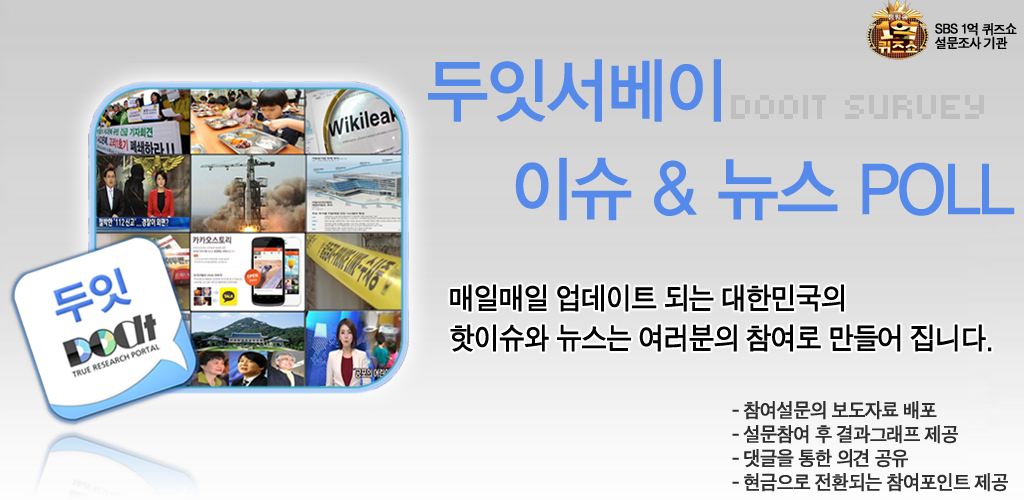
<style>
.page{position:relative;width:1024px;height:500px}
.page>*{position:absolute;margin:0}
.t1{font:13.8px/6.9px "SandTg";letter-spacing:-0.05em;color:#000000;font-weight:bold;scale:0.95 1}
.t2{font:70px "YDIYGO330";letter-spacing:-0.05em;color:#558aea;font-weight:bold;scale:0.95 1}
.t3{font:38px "Kroeger0555";color:#bfbfbf;text-transform:uppercase}
.t4{font:30px/10px "SandTg";letter-spacing:-0.05em;color:#000001;font-weight:bold;scale:0.95 1}
.t5{font:20px/12px "SandTg";letter-spacing:-0.05em;color:#2e2e30;font-weight:bold;scale:0.95 1}
</style>
<div class="page">
<p class="t1" style="left:935px;top:23px;width:82px;height:27px">SBS 1억 퀴즈쇼<br><br>설문조사 기관</p>
<p class="t2" style="left:428px;top:59px;width:293px;height:63px">두잇서베이</p>
<p class="t3" style="left:731px;top:95px;width:253px;height:24px">DOOIT SURVEY</p>
<p class="t2" style="left:515px;top:157px;width:500px;height:64px">이슈 &amp; 뉴스 POLL</p>
<p class="t4" style="left:450px;top:284px;width:542px;height:68px">매일매일 업데이트 되는 대한민국의<br><br><br><br>핫이슈와 뉴스는 여러분의 참여로 만들어 집니다.</p>
<p class="t5" style="left:732px;top:401px;width:276px;height:91px">- 참여설문의 보도자료 배포<br><br>- 설문참여 후 결과그래프 제공<br><br>- 댓글을 통한 의견 공유<br><br>- 현금으로 전환되는 참여포인트 제공</p>
</div>
